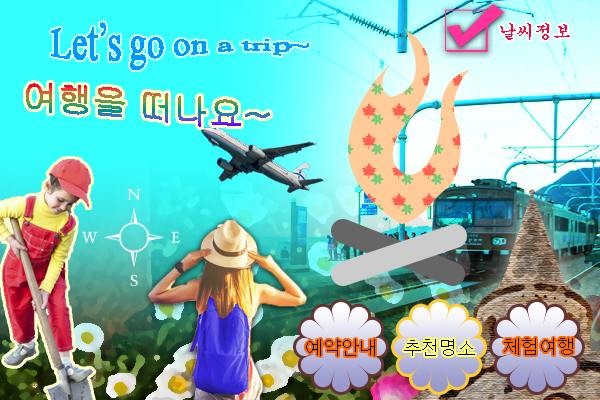
<style>
.page{position:relative;width:600px;height:400px}
.page>*{position:absolute;margin:0}
.t1{font:35px "TimesNewRomanPSMT";color:#0099ff}
.t2{font:18px "Gungsuh";color:#ff0033}
.t3{font:35px "Gulim"}
.t4{font:18px "Dotum";color:#000000}
</style>
<div class="page">
<p class="t1" style="left:51px;top:22px;width:258px;height:48px">Let’s go on a trip~</p>
<p class="t2" style="left:500px;top:23px;width:70px;height:17px">날씨정보</p>
<p class="t3" style="left:26px;top:83px;width:244px;height:44px">여행을 떠나요~</p>
<p class="t4" style="left:306px;top:339px;width:69px;height:17px">예약안내</p>
<p class="t4" style="left:404px;top:339px;width:71px;height:17px">추천명소</p>
<p class="t4" style="left:504px;top:338px;width:69px;height:17px">체험여행</p>
</div>
